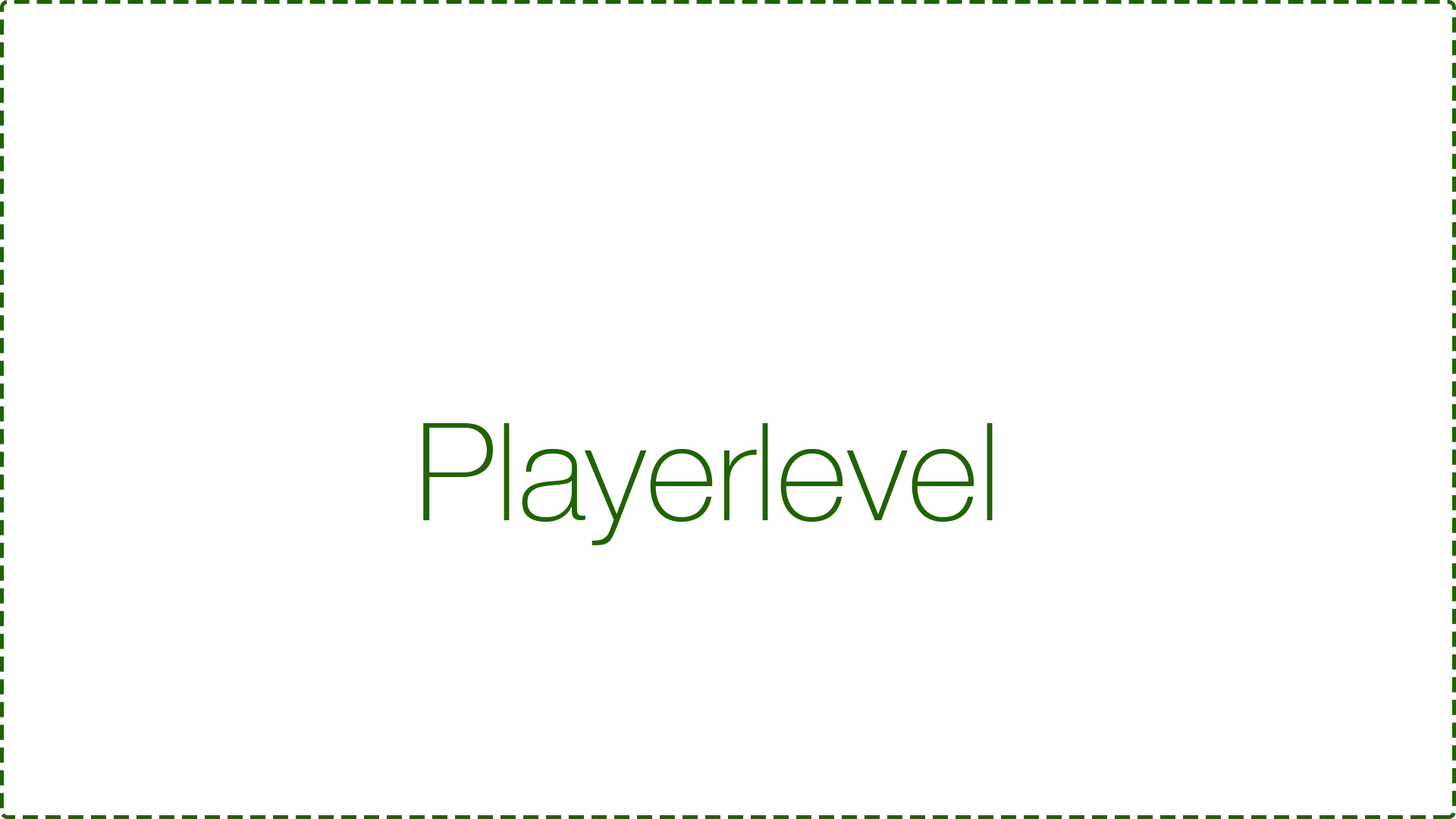
<style>
.page{position:relative;width:1456px;height:819px;background:#ffffff}
.page>*{position:absolute;margin:0}
.t1{font:135.7px "HelveticaNeue-Thin";color:#1f6400}
</style>
<div class="page">
<p class="t1" style="left:423px;top:423px;width:570px;height:122px">Playerlevel</p>
</div>
